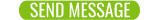
<style>
.page{position:relative;width:157px;height:20px;background:#83bf17}
.page>*{position:absolute;margin:0}
.t1{font:18px "Oswald-Regular";color:#ffffff}
</style>
<div class="page">
<p class="t1" style="left:30px;top:2px;width:100px;height:16px">SEND MESSAGE</p>
</div>
